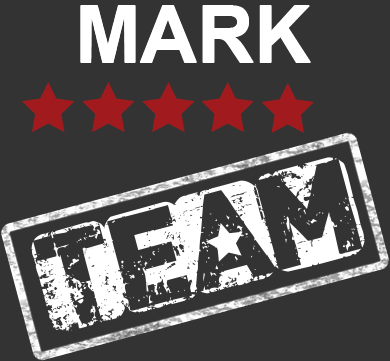
<style>
.page{position:relative;width:390px;height:361px;background:#333333}
.page>*{position:absolute;margin:0}
.t1{font:78.6px "Arial-BoldMT";color:#ffffff}
.t2{font:118.6px "CFPunkisnotDead-Regular";color:#ffffff}
</style>
<div class="page">
<p class="t1" style="left:80px;top:5px;width:231px;height:57px">MARK</p>
<p class="t1" style="left:80px;top:6px;width:231px;height:57px">MARK</p>
<p class="t2" style="left:31px;top:157px;width:334px;height:175px;rotate:-15deg">team</p>
</div>
